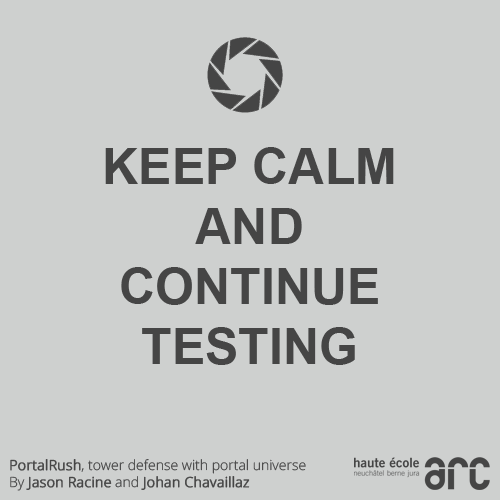
<style>
.page{position:relative;width:500px;height:500px;background:#ced0cf}
.page>*{position:absolute;margin:0}
.t1{font:50px "Arial-BoldMT";color:#454545;text-transform:uppercase}
.t2{font:14px "OpenSans-Light";color:#454545}
.t3{font:14px "OpenSans-Light";color:#454545;font-weight:bold}
</style>
<div class="page">
<p class="t1" style="left:105px;top:147px;width:289px;height:218px;text-align:center">keep calm and <br>continue testing</p>
<p class="t2" style="left:10px;top:459px;width:296px;height:32px"><span class="t3">PortalRush</span>, tower defense with portal universe<br>By <span class="t3">Jason Racine</span> and <span class="t3">Johan Chavaillaz</span></p>
</div>
